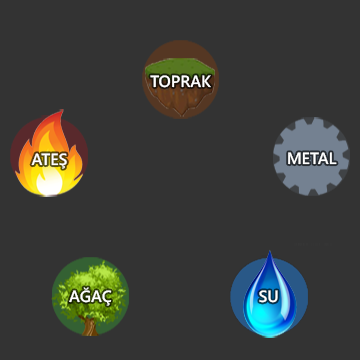
<style>
.page{position:relative;width:360px;height:360px;background:#333333}
.page>*{position:absolute;margin:0}
.t1{font:16.4px "SegoeUI-Semibold";color:#ffffff}
</style>
<div class="page">
<p class="t1" style="left:150px;top:75px;width:61px;height:13px">TOPRAK</p>
<p class="t1" style="left:31px;top:153px;width:36px;height:16px">ATEŞ</p>
<p class="t1" style="left:288px;top:152px;width:49px;height:13px">METAL</p>
<p class="t1" style="left:69px;top:287px;width:43px;height:19px">AĞAÇ</p>
<p class="t1" style="left:259px;top:290px;width:19px;height:13px">SU</p>
</div>
